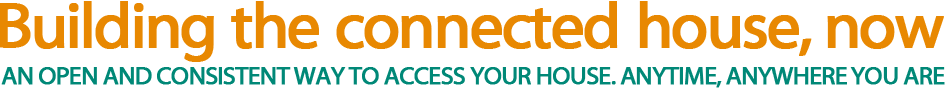
<style>
.page{position:relative;width:946px;height:96px;background:#ffffff}
.page>*{position:absolute;margin:0}
.t1{font:65.3px "MyriadWebPro";letter-spacing:-0.055em;color:#e88801;font-weight:bold}
.t2{font:25.4px "MyriadWebPro";letter-spacing:-0.055em;color:#008877;font-weight:bold}
</style>
<div class="page">
<p class="t1" style="left:0px;top:1px;width:944px;height:61px">Building the connected house, now</p>
<p class="t2" style="left:1px;top:67px;width:944px;height:21px">AN OPEN AND CONSISTENT WAY TO ACCESS YOUR HOUSE. ANYTIME, ANYWHERE YOU ARE</p>
</div>
